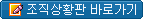
<style>
.page{position:relative;width:143px;height:19px;background:#0f679e}
.page>*{position:absolute;margin:0}
.t1{font:12px "Gulim";color:#f4f7fb}
</style>
<div class="page">
<p class="t1" style="left:27px;top:4px;width:109px;height:11px">조직상황판 바로가기</p>
</div>
